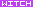
<style>
.page{position:relative;width:33px;height:7px;background:#c140f4}
.page>*{position:absolute;margin:0}
.t1{font:8px "5x5-Pixel";color:#f8fff9}
</style>
<div class="page">
<p class="t1" style="left:2px;top:1px;width:29px;height:5px">witch</p>
</div>
